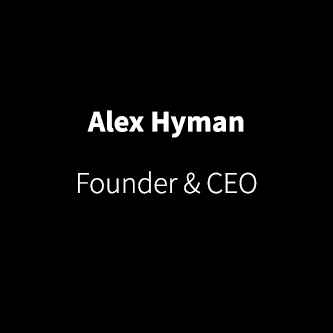
<style>
.page{position:relative;width:333px;height:333px;background:#000000}
.page>*{position:absolute;margin:0}
.t1{font:29.9px "SourceSansPro-Bold";color:#ffffff}
.t2{font:29.9px "SourceSansPro-Light";color:#ffffff}
</style>
<div class="page">
<p class="t1" style="left:87px;top:110px;width:157px;height:28px">Alex Hyman</p>
<p class="t2" style="left:78px;top:171px;width:179px;height:23px">Founder &amp; CEO</p>
</div>
